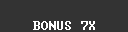
<style>
.page{position:relative;width:128px;height:32px;background:#333333}
.page>*{position:absolute;margin:0}
.t1{font:12px "Terminal";color:#ffffff}
</style>
<div class="page">
<p class="t1" style="left:33px;top:21px;width:62px;height:9px">BONUS 7X</p>
</div>
